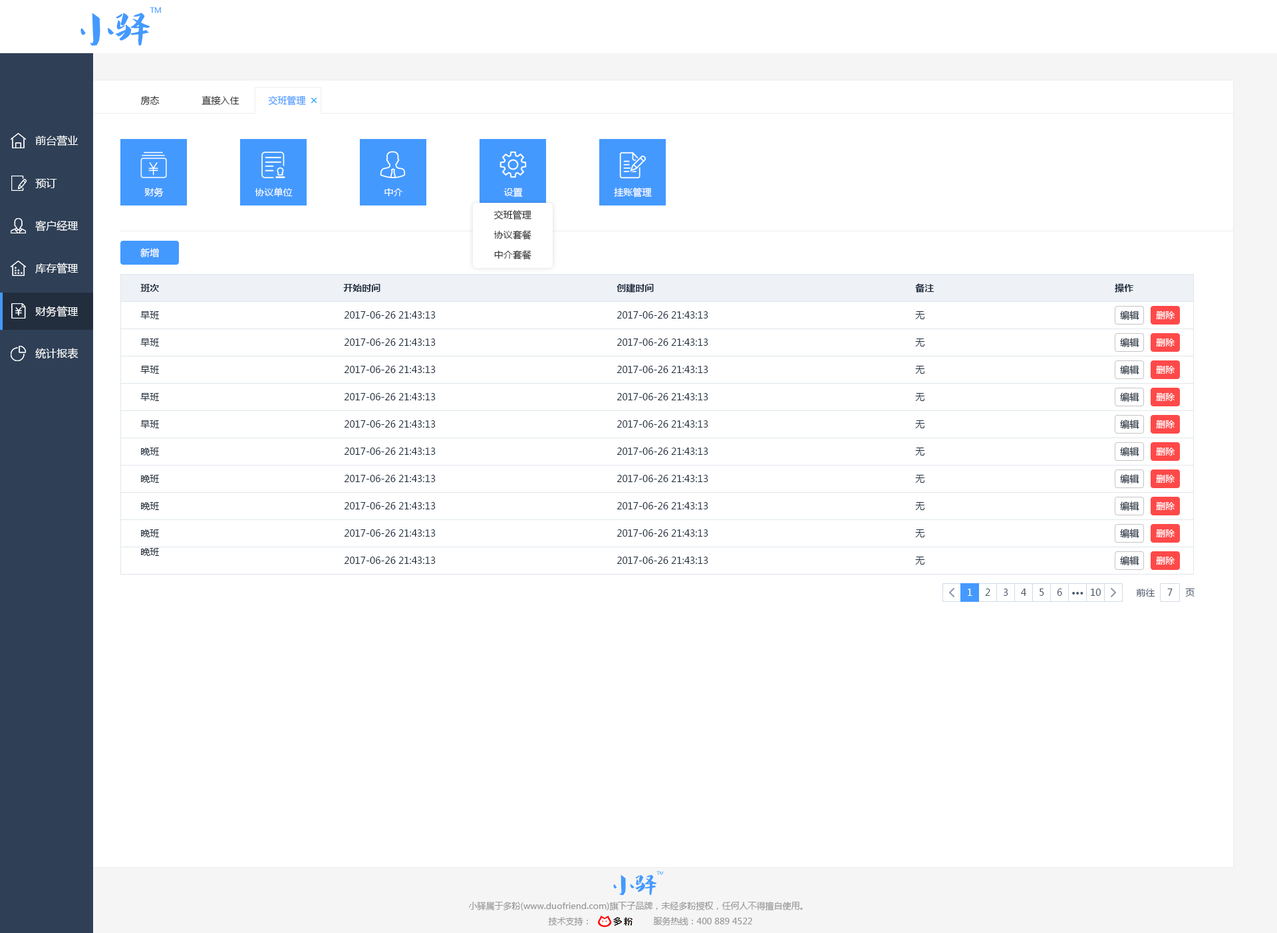
<style>
.page{position:relative;width:1277px;height:933px;background:#ffffff}
.page>*{position:absolute;margin:0}
.t1{font:9.3px "MicrosoftYaHei";color:#333333}
.t2{font:9.3px "MicrosoftYaHei";color:#4499ff}
.t3{font:10.6px "MicrosoftYaHei";color:#ffffff}
.t4{font:9.3px "MicrosoftYaHei";color:#ffffff}
.t5{font:9.3px "MicrosoftYaHei-Bold";color:#1f2d3d}
.t6{font:9.3px "MicrosoftYaHei";color:#1f2d3d}
.t7{font:9.3px "MicrosoftYaHei";color:#48576a}
.t8{font:9.3px "MicrosoftYaHei-Bold";color:#48576a}
.t9{font:8.6px "MicrosoftYaHei";color:#999999}
</style>
<div class="page">
<p class="t1" style="left:140px;top:96px;width:20px;height:9px">房态</p>
<p class="t1" style="left:202px;top:96px;width:38px;height:9px">直接入住</p>
<p class="t2" style="left:268px;top:96px;width:38px;height:10px">交班管理</p>
<p class="t3" style="left:35px;top:135px;width:44px;height:11px">前台营业</p>
<p class="t3" style="left:35px;top:178px;width:22px;height:10px">预订</p>
<p class="t4" style="left:144px;top:188px;width:20px;height:9px">财务</p>
<p class="t4" style="left:255px;top:188px;width:38px;height:9px">协议单位</p>
<p class="t4" style="left:385px;top:188px;width:18px;height:8px">中介</p>
<p class="t4" style="left:504px;top:188px;width:19px;height:9px">设置</p>
<p class="t4" style="left:614px;top:188px;width:38px;height:10px">挂账管理</p>
<p class="t3" style="left:35px;top:220px;width:44px;height:12px">客户经理</p>
<p class="t1" style="left:494px;top:210px;width:38px;height:10px">交班管理</p>
<p class="t1" style="left:494px;top:230px;width:38px;height:10px">协议套餐</p>
<p class="t4" style="left:140px;top:248px;width:19px;height:9px">新增</p>
<p class="t1" style="left:494px;top:250px;width:38px;height:9px">中介套餐</p>
<p class="t3" style="left:35px;top:263px;width:44px;height:11px">库存管理</p>
<p class="t5" style="left:140px;top:284px;width:20px;height:8px">班次</p>
<p class="t5" style="left:343px;top:284px;width:38px;height:8px">开始时间</p>
<p class="t5" style="left:617px;top:283px;width:37px;height:10px">创建时间</p>
<p class="t5" style="left:915px;top:283px;width:20px;height:10px">备注</p>
<p class="t5" style="left:1115px;top:283px;width:19px;height:10px">操作</p>
<p class="t3" style="left:35px;top:306px;width:44px;height:11px">财务管理</p>
<p class="t6" style="left:140px;top:311px;width:20px;height:8px">早班</p>
<p class="t6" style="left:344px;top:311px;width:92px;height:8px">2017-06-26 21:43:13</p>
<p class="t6" style="left:617px;top:311px;width:92px;height:8px">2017-06-26 21:43:13</p>
<p class="t6" style="left:915px;top:311px;width:10px;height:8px">无</p>
<p class="t6" style="left:1120px;top:311px;width:20px;height:9px">编辑</p>
<p class="t4" style="left:1156px;top:311px;width:20px;height:8px">删除</p>
<p class="t6" style="left:140px;top:339px;width:20px;height:8px">早班</p>
<p class="t6" style="left:344px;top:339px;width:92px;height:7px">2017-06-26 21:43:13</p>
<p class="t6" style="left:617px;top:339px;width:92px;height:7px">2017-06-26 21:43:13</p>
<p class="t6" style="left:915px;top:339px;width:10px;height:8px">无</p>
<p class="t6" style="left:1120px;top:338px;width:20px;height:9px">编辑</p>
<p class="t4" style="left:1156px;top:339px;width:20px;height:8px">删除</p>
<p class="t3" style="left:35px;top:348px;width:44px;height:11px">统计报表</p>
<p class="t6" style="left:140px;top:366px;width:20px;height:8px">早班</p>
<p class="t6" style="left:344px;top:366px;width:92px;height:7px">2017-06-26 21:43:13</p>
<p class="t6" style="left:617px;top:366px;width:92px;height:7px">2017-06-26 21:43:13</p>
<p class="t6" style="left:915px;top:366px;width:10px;height:8px">无</p>
<p class="t6" style="left:1120px;top:365px;width:20px;height:10px">编辑</p>
<p class="t4" style="left:1156px;top:366px;width:20px;height:8px">删除</p>
<p class="t6" style="left:140px;top:393px;width:20px;height:8px">早班</p>
<p class="t6" style="left:344px;top:393px;width:92px;height:8px">2017-06-26 21:43:13</p>
<p class="t6" style="left:617px;top:393px;width:92px;height:8px">2017-06-26 21:43:13</p>
<p class="t6" style="left:915px;top:393px;width:10px;height:8px">无</p>
<p class="t6" style="left:1120px;top:393px;width:20px;height:9px">编辑</p>
<p class="t4" style="left:1156px;top:393px;width:20px;height:8px">删除</p>
<p class="t6" style="left:140px;top:420px;width:20px;height:8px">早班</p>
<p class="t6" style="left:344px;top:420px;width:92px;height:8px">2017-06-26 21:43:13</p>
<p class="t6" style="left:617px;top:420px;width:92px;height:8px">2017-06-26 21:43:13</p>
<p class="t6" style="left:915px;top:420px;width:10px;height:8px">无</p>
<p class="t6" style="left:1120px;top:420px;width:20px;height:9px">编辑</p>
<p class="t4" style="left:1156px;top:420px;width:20px;height:8px">删除</p>
<p class="t6" style="left:141px;top:448px;width:19px;height:8px">晚班</p>
<p class="t6" style="left:344px;top:448px;width:92px;height:7px">2017-06-26 21:43:13</p>
<p class="t6" style="left:617px;top:448px;width:92px;height:7px">2017-06-26 21:43:13</p>
<p class="t6" style="left:915px;top:448px;width:10px;height:8px">无</p>
<p class="t6" style="left:1120px;top:447px;width:20px;height:9px">编辑</p>
<p class="t4" style="left:1156px;top:448px;width:20px;height:8px">删除</p>
<p class="t6" style="left:141px;top:475px;width:19px;height:8px">晚班</p>
<p class="t6" style="left:344px;top:475px;width:92px;height:7px">2017-06-26 21:43:13</p>
<p class="t6" style="left:617px;top:475px;width:92px;height:7px">2017-06-26 21:43:13</p>
<p class="t6" style="left:915px;top:475px;width:10px;height:8px">无</p>
<p class="t6" style="left:1120px;top:474px;width:20px;height:10px">编辑</p>
<p class="t4" style="left:1156px;top:475px;width:20px;height:8px">删除</p>
<p class="t6" style="left:141px;top:502px;width:19px;height:8px">晚班</p>
<p class="t6" style="left:344px;top:502px;width:92px;height:8px">2017-06-26 21:43:13</p>
<p class="t6" style="left:617px;top:502px;width:92px;height:8px">2017-06-26 21:43:13</p>
<p class="t6" style="left:915px;top:502px;width:10px;height:8px">无</p>
<p class="t6" style="left:1120px;top:502px;width:20px;height:9px">编辑</p>
<p class="t4" style="left:1156px;top:502px;width:20px;height:8px">删除</p>
<p class="t6" style="left:141px;top:530px;width:19px;height:8px">晚班</p>
<p class="t6" style="left:344px;top:530px;width:92px;height:7px">2017-06-26 21:43:13</p>
<p class="t6" style="left:617px;top:530px;width:92px;height:7px">2017-06-26 21:43:13</p>
<p class="t6" style="left:915px;top:530px;width:10px;height:8px">无</p>
<p class="t6" style="left:1120px;top:529px;width:20px;height:9px">编辑</p>
<p class="t4" style="left:1156px;top:530px;width:20px;height:8px">删除</p>
<p class="t6" style="left:141px;top:548px;width:19px;height:8px">晚班</p>
<p class="t6" style="left:344px;top:557px;width:92px;height:7px">2017-06-26 21:43:13</p>
<p class="t6" style="left:617px;top:557px;width:92px;height:7px">2017-06-26 21:43:13</p>
<p class="t6" style="left:915px;top:557px;width:10px;height:8px">无</p>
<p class="t6" style="left:1120px;top:556px;width:20px;height:10px">编辑</p>
<p class="t4" style="left:1156px;top:557px;width:20px;height:8px">删除</p>
<p class="t4" style="left:968px;top:589px;width:5px;height:7px">1</p>
<p class="t7" style="left:985px;top:589px;width:6px;height:7px">2</p>
<p class="t7" style="left:1003px;top:589px;width:6px;height:7px">3</p>
<p class="t7" style="left:1021px;top:589px;width:6px;height:7px">4</p>
<p class="t7" style="left:1040px;top:589px;width:5px;height:7px">5</p>
<p class="t7" style="left:1057px;top:589px;width:6px;height:7px">6</p>
<p class="t8" style="left:1073px;top:592px;width:11px;height:3px">···</p>
<p class="t7" style="left:1091px;top:589px;width:10px;height:7px">10</p>
<p class="t7" style="left:1136px;top:589px;width:20px;height:8px">前往</p>
<p class="t7" style="left:1168px;top:589px;width:5px;height:7px">7</p>
<p class="t7" style="left:1186px;top:589px;width:9px;height:8px">页</p>
<p class="t9" style="left:468px;top:902px;width:335px;height:9px">小驿属于多粉(www.duofriend.com)旗下子品牌，未经多粉授权，任何人不得擅自使用。</p>
<p class="t9" style="left:548px;top:917px;width:40px;height:9px">技术支持：</p>
<p class="t9" style="left:653px;top:917px;width:99px;height:9px">服务热线：400 889 4522</p>
</div>
